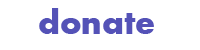
<style>
.page{position:relative;width:200px;height:50px;background:#ffffff}
.page>*{position:absolute;margin:0}
.t1{font:35px "Aharoni-Bold";color:#5452b7}
</style>
<div class="page">
<p class="t1" style="left:39px;top:8px;width:115px;height:26px">donate</p>
</div>
